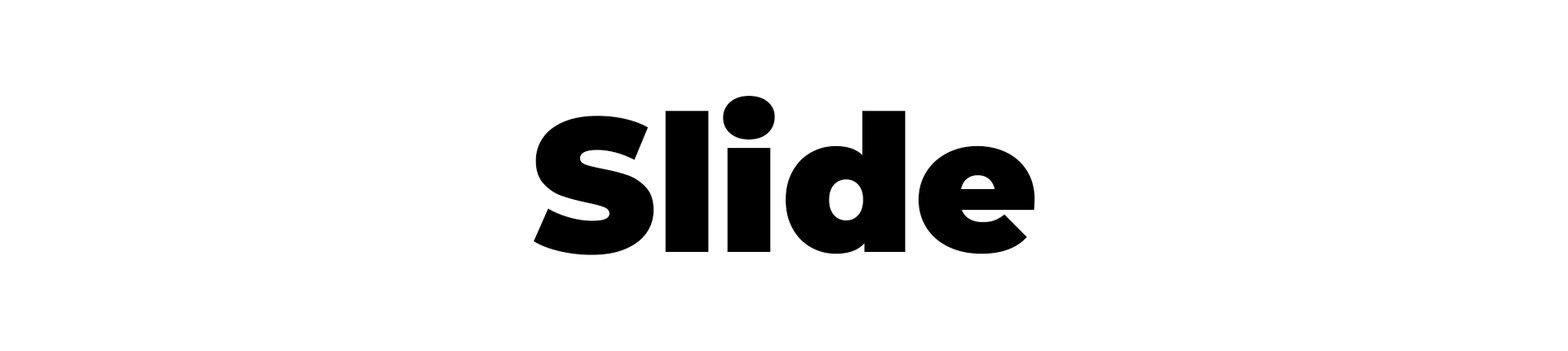
<style>
.page{position:relative;width:1568px;height:351px;background:#ffffff}
.page>*{position:absolute;margin:0}
.t1{font:190.1px "Montserrat-Black";color:#000000}
</style>
<div class="page">
<p class="t1" style="left:533px;top:96px;width:502px;height:159px">Slide</p>
</div>
